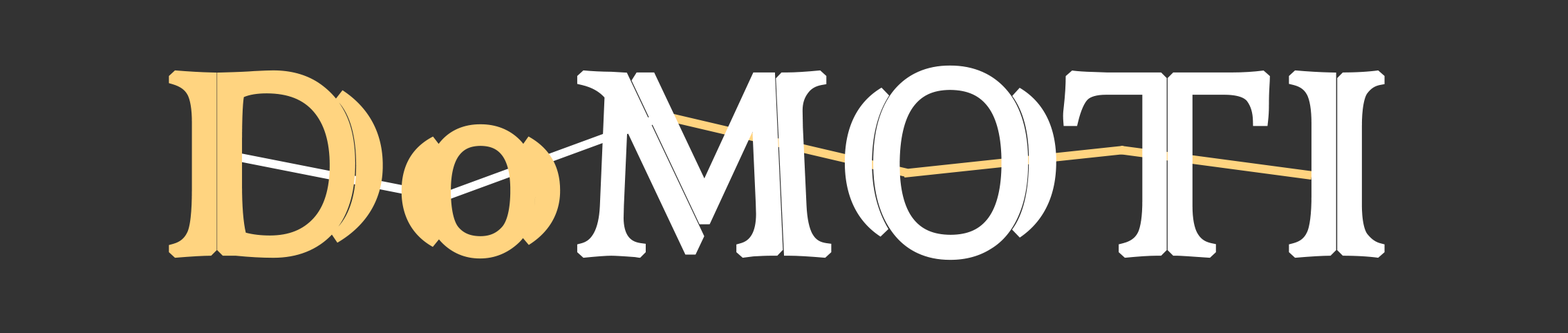
<style>
.page{position:relative;width:1568px;height:333px;background:#333333}
.page>*{position:absolute;margin:0}
.t1{font:335.5px "ColonnaMT";color:#ffffff;font-weight:bold}
.t2{font:335.5px "ColonnaMT";color:#ffd480;font-weight:bold}
</style>
<div class="page">
<p class="t1" style="left:169px;top:65px;width:1216px;height:196px"><span class="t2">Do</span>MOTI</p>
</div>
